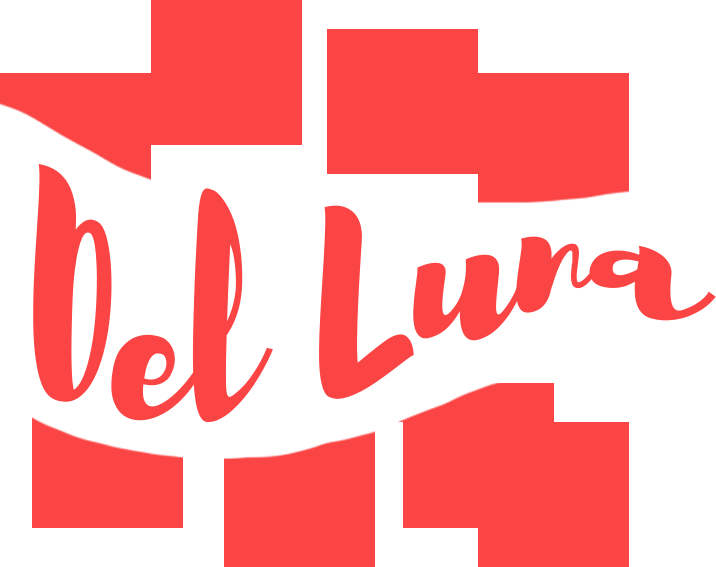
<style>
.page{position:relative;width:716px;height:567px;background:#ffffff}
.page>*{position:absolute;margin:0}
.t1{font:209.7px "Brusher-Regular";color:#f05252}
</style>
<div class="page">
<p class="t1" style="left:33px;top:164px;width:683px;height:259px">Del Luna</p>
</div>
